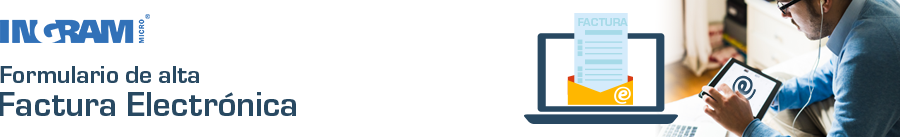
<style>
.page{position:relative;width:900px;height:137px;background:#ffffff}
.page>*{position:absolute;margin:0}
.t1{font:11.8px "Eurostile-Bol";color:#a6dae8}
.t2{font:25.5px "Eurostile-Bol";color:#284962}
.t3{font:35.3px "Eurostile-Bol";color:#284962}
</style>
<div class="page">
<p class="t1" style="left:578px;top:18px;width:50px;height:8px">FACTURA</p>
<p class="t2" style="left:0px;top:66px;width:199px;height:17px">Formulario de alta</p>
<p class="t3" style="left:0px;top:92px;width:296px;height:24px">Factura Electrónica</p>
</div>
